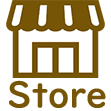
<style>
.page{position:relative;width:111px;height:111px;background:#ffffff}
.page>*{position:absolute;margin:0}
.t1{font:35.6px "UDDigiKyokashoNK-B";color:#765506}
</style>
<div class="page">
<p class="t1" style="left:9px;top:80px;width:97px;height:28px">Store</p>
</div>
